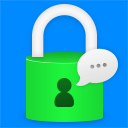
<style>
.page{position:relative;width:128px;height:128px;background:#008aff}
.page>*{position:absolute;margin:0}
.t1{font:18px "Helvetica";color:#939393}
</style>
<div class="page">
<p class="t1" style="left:90px;top:63px;width:17px;height:6px;rotate:-8deg">•••</p>
</div>
